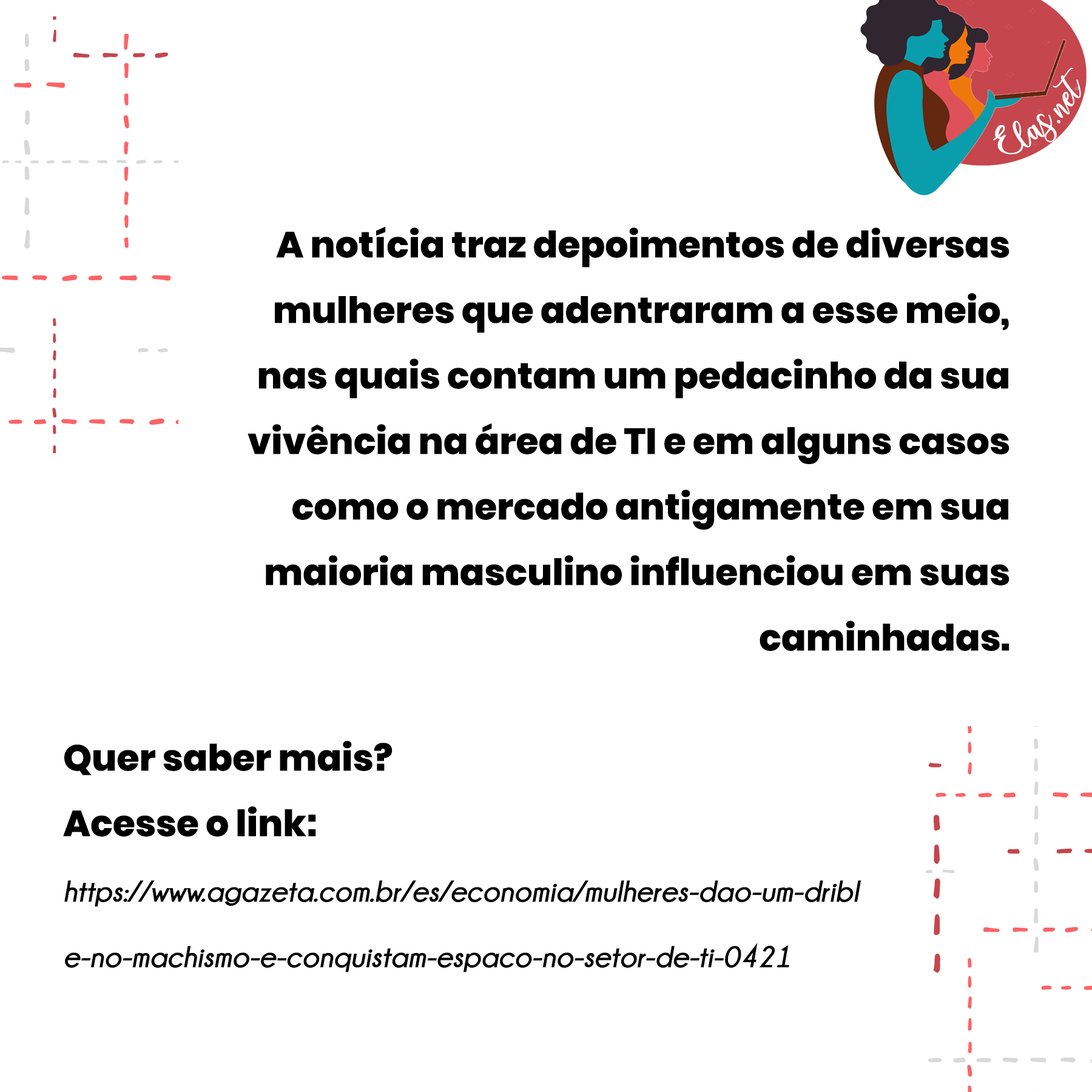
<style>
.page{position:relative;width:1092px;height:1092px;background:#ffffff}
.page>*{position:absolute;margin:0}
.t1{font:25px "charlinda-Regular";color:#ffffff;scale:1.18 1}
.t2{font:36.4px/65.5px "Poppins-ExtraBold";color:#000000}
.t3{font:30.3px/65.5px "Champagne&Limousines-BoldItalic";color:#000000}
</style>
<div class="page">
<p class="t1" style="left:993px;top:67px;width:88px;height:88px;rotate:-42deg">Elas.net</p>
<p class="t2" style="left:248px;top:226px;width:761px;height:425px;text-align:right">A notícia traz depoimentos de diversas mulheres que adentraram a esse meio, nas quais contam um pedacinho da sua vivência na área de TI e em alguns casos como o mercado antigamente em sua maioria masculino influenciou em suas caminhadas.</p>
<p class="t3" style="left:63px;top:741px;width:798px;height:231px"><span class="t2">Quer saber mais?<br>Acesse o link:<br></span>https://www.agazeta.com.br/es/economia/mulheres-dao-um-drible-no-machismo-e-conquistam-espaco-no-setor-de-ti-0421<br><span class="t2"><br><br>stam-espaco-no-setor-de-ti-0421</span></p>
</div>
